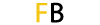
<style>
.page{position:relative;width:100px;height:25px;background:#ffffff}
.page>*{position:absolute;margin:0}
.t1{font:28px "MyriadPro-Regular";color:#f4c613;font-weight:bold}
.t2{font:28px "MyriadPro-Regular";color:#000000;font-weight:bold}
</style>
<div class="page">
<p class="t1" style="left:36px;top:2px;width:28px;height:21px">F<span class="t2">B</span></p>
</div>
